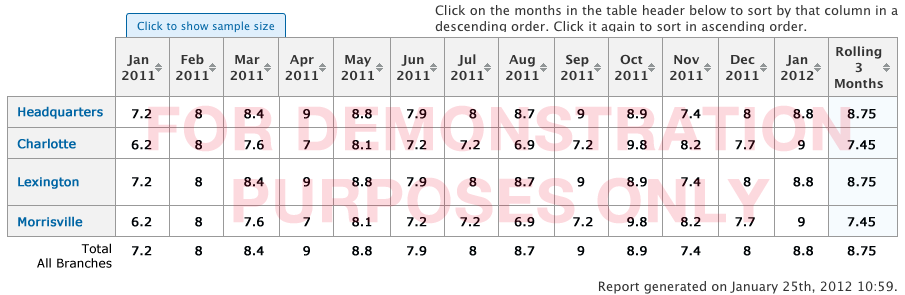
<style>
.page{position:relative;width:905px;height:295px;background:#ffffff}
.page>*{position:absolute;margin:0}
.t1{font:12px/30px "Verdana";color:#0065a4;font-weight:bold}
.t2{font:12px/32px "Verdana";color:#0065a4;font-weight:bold}
.t3{font:12px/38px "Verdana";color:#0065a4;font-weight:bold}
.t4{font:12px/40px "Verdana";color:#0065a4;font-weight:bold}
.t5{font:12px "Verdana";font-weight:bold}
.t6{font:60px "HelveticaNeue-Bold";color:#fcd9de;font-weight:bold}
.t7{font:12px "Verdana";color:#000407;font-weight:bold}
.t8{font:12px "Verdana";color:#000000}
</style>
<div class="page">
<p class="t1" style="left:17px;top:106px;width:86px;height:121px">Headquarters<br><span class="t2">Charlotte<br></span><span class="t3">Lexington<br></span><span class="t4">Morrisville</span></p>
<p class="t5" style="left:132px;top:109px;width:744px;height:10px">7.2          8   8.4       9   8.8      7.9    8      8.7     9       8.9    7.4  8    8.8        8.75</p>
<p class="t6" style="left:148px;top:105px;width:703px;height:119px;text-align:center">FOR DEMONSTRATION<br>PURPOSES ONLY</p>
<p class="t5" style="left:131px;top:140px;width:744px;height:10px">6.2          8   7.6       7   8.1      7.2  7.2      6.9    7.2       9.8    8.2       7.7     9         7.45</p>
<p class="t7" style="left:132px;top:177px;width:744px;height:10px">7.2          8   8.4       9   8.8      7.9    8      8.7     9       8.9    7.4  8    8.8        8.75</p>
<p class="t7" style="left:131px;top:217px;width:744px;height:10px">6.2          8   7.6       7   8.1      7.2  7.2      6.9    7.2       9.8    8.2       7.7     9         7.45</p>
<p class="t8" style="left:37px;top:243px;width:75px;height:25px;text-align:right">Total<br>All Branches</p>
<p class="t7" style="left:132px;top:246px;width:744px;height:10px">7.2          8   8.4       9   8.8      7.9    8      8.7     9       8.9    7.4  8    8.8        8.75</p>
</div>
